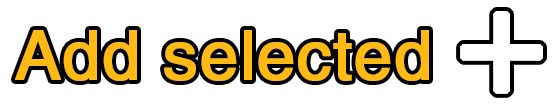
<style>
.page{position:relative;width:560px;height:108px;background:#ffffff}
.page>*{position:absolute;margin:0}
.t1{font:68.8px "HelveticaCE";color:#ffba15;font-weight:bold}
</style>
<div class="page">
<p class="t1" style="left:15px;top:30px;width:414px;height:51px">Add selected</p>
</div>
